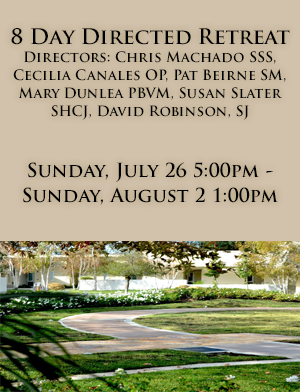
<style>
.page{position:relative;width:300px;height:392px;background:#d2c1ab}
.page>*{position:absolute;margin:0}
.t1{font:14px/18px "TrajanPro-Bold";color:#000000}
.t2{font:21px/25px "TrajanPro-Bold";color:#000000}
.t3{font:19px/25px "TrajanPro-Bold";color:#000000}
</style>
<div class="page">
<p class="t1" style="left:11px;top:28px;width:279px;height:177px;text-align:center"><span class="t2">8 Day Directed Retreat<br></span>Directors: Chris Machado SSS, Cecilia Canales OP, Pat Beirne SM, Mary Dunlea PBVM, Susan Slater SHCJ, David Robinson, SJ<br><br><br><span class="t3">Sunday, July 26 5:00pm - <br>Sunday, August 2 1:00pm</span></p>
</div>
